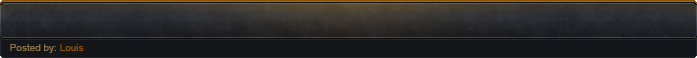
<style>
.page{position:relative;width:697px;height:58px;background:#141619}
.page>*{position:absolute;margin:0}
.t1{font:10px "ArialMT";color:#89704b}
.t2{font:10px "ArialMT";color:#8b5200}
</style>
<div class="page">
<p class="t1" style="left:10px;top:44px;width:74px;height:9px">Posted by: <span class="t2">Louis</span></p>
</div>
